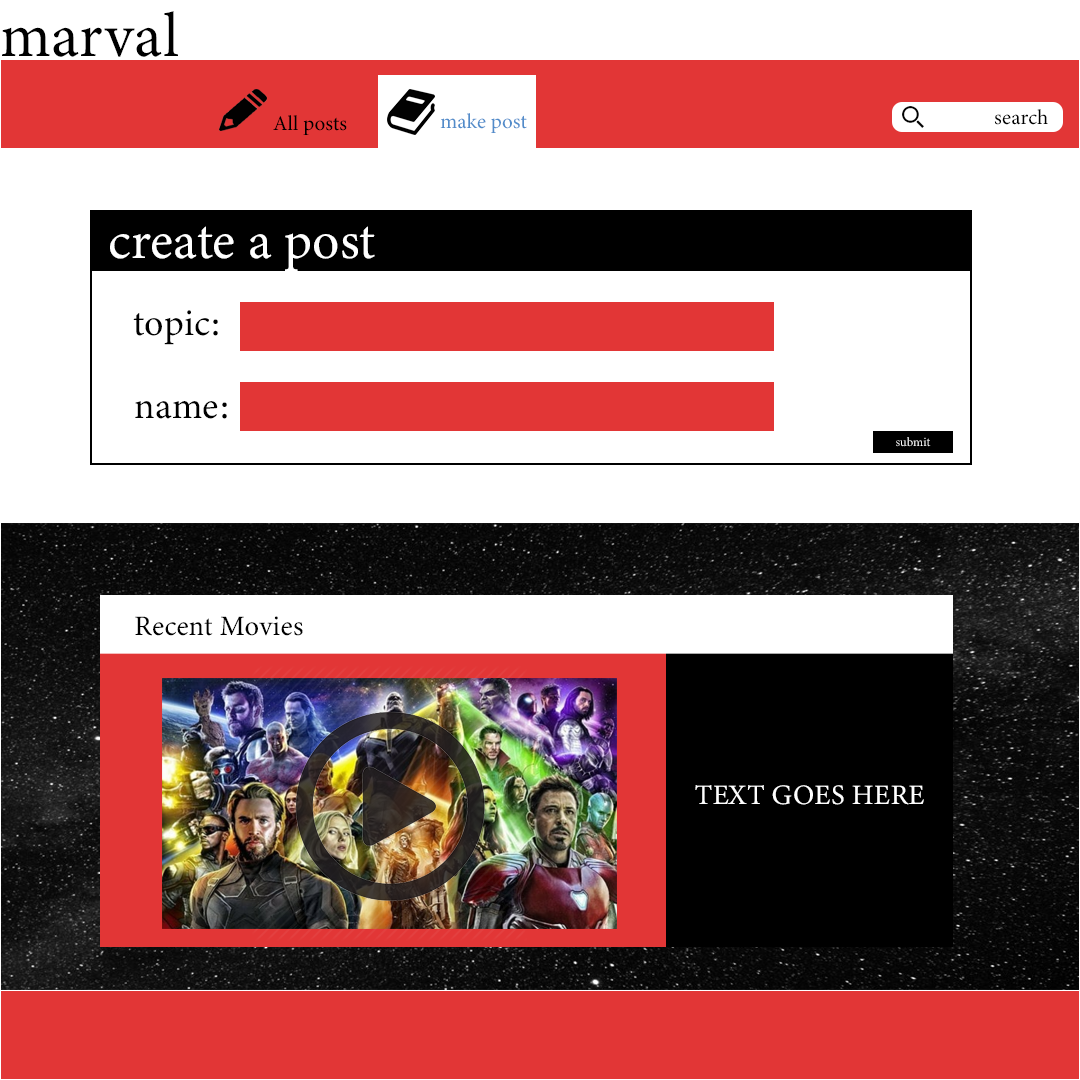
<style>
.page{position:relative;width:1080px;height:1080px;background:#ffffff}
.page>*{position:absolute;margin:0}
.t1{font:62.5px "MinionVariableConcept-Roman";letter-spacing:0.001em;color:#000000}
.t2{font:20.8px "MinionVariableConcept-Roman";letter-spacing:0.001em;color:#518cca}
.t3{font:20.8px "MinionVariableConcept-Roman";letter-spacing:0.001em;color:#000000}
.t4{font:53px "MinionVariableConcept-Roman";letter-spacing:0.001em;color:#ffffff}
.t5{font:37.5px "MinionVariableConcept-Roman";letter-spacing:0.001em;color:#000000}
.t6{font:12.5px "MinionVariableConcept-Roman";letter-spacing:0.001em;color:#ffffff}
.t7{font:28.2px "MinionVariableConcept-Roman";letter-spacing:0.001em;color:#000000}
.t8{font:28.2px "MinionVariableConcept-Roman";letter-spacing:0.001em;color:#ffffff}
</style>
<div class="page">
<p class="t1" style="left:2px;top:11px;width:176px;height:46px">marval</p>
<p class="t2" style="left:440px;top:113px;width:87px;height:20px">make post</p>
<p class="t3" style="left:994px;top:109px;width:54px;height:16px">search</p>
<p class="t3" style="left:273px;top:115px;width:74px;height:20px">All posts</p>
<p class="t4" style="left:110px;top:226px;width:265px;height:45px">create a post</p>
<p class="t5" style="left:133px;top:310px;width:85px;height:35px">topic:</p>
<p class="t5" style="left:135px;top:401px;width:92px;height:18px">name:</p>
<p class="t6" style="left:896px;top:437px;width:35px;height:10px">submit</p>
<p class="t7" style="left:135px;top:616px;width:168px;height:20px">Recent Movies</p>
<p class="t8" style="left:695px;top:785px;width:229px;height:20px">TEXT GOES HERE</p>
</div>
